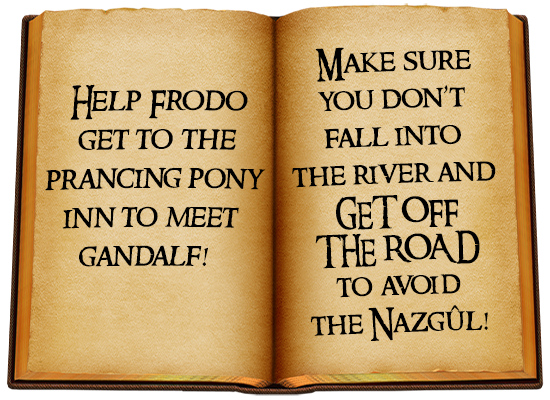
<style>
.page{position:relative;width:550px;height:400px}
.page>*{position:absolute;margin:0}
.t1{font:31.1px "RingbearerMedium";color:#000000}
.t2{font:32.5px "RingbearerMedium";color:#000000;scale:0.93 1}
</style>
<div class="page">
<p class="t1" style="left:292px;top:47px;width:204px;height:294px;text-align:center;rotate:-2deg">Make sure<br>you don’t<br>fall into<br>the river and<br>GET OFF<br>THE ROAD<br>to avoid<br>the Nazgûl!</p>
<p class="t2" style="left:45px;top:84px;width:221px;height:183px;text-align:center">Help Frodo<br>get to the<br>prancing pony<br>inn to meet<br>gandalf!</p>
</div>
